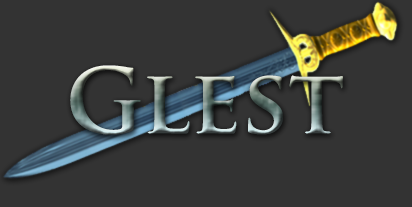
<style>
.page{position:relative;width:412px;height:207px;background:#333333}
.page>*{position:absolute;margin:0}
.t1{font:88px "TrajanPro-Bold"}
</style>
<div class="page">
<p class="t1" style="left:70px;top:65px;width:273px;height:70px">Glest</p>
</div>
